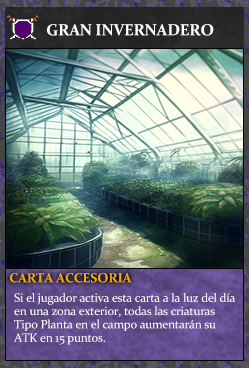
<style>
.page{position:relative;width:249px;height:368px}
.page>*{position:absolute;margin:0}
.t1{font:16px "Constantia-Bold";letter-spacing:-0.02em;color:#ffffff}
.t2{font:13.3px "Constantia-Bold";letter-spacing:-0.02em;color:#f2ac05}
.t3{font:12px/13.3px "Constantia";letter-spacing:-0.02em;color:#ffffff}
</style>
<div class="page">
<p class="t1" style="left:47px;top:24px;width:167px;height:12px">GRAN INVERNADERO</p>
<p class="t2" style="left:10px;top:273px;width:122px;height:10px">CARTA ACCESORIA</p>
<p class="t3" style="left:13px;top:293px;width:222px;height:52px">Si el jugador activa esta carta a la luz del día<br>en una zona exterior, todas las criaturas<br>Tipo Planta en el campo aumentarán su<br>ATK en 15 puntos.</p>
</div>
